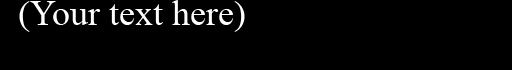
<style>
.page{position:relative;width:512px;height:70px;background:#000000}
.page>*{position:absolute;margin:0}
.t1{font:36px "TimesNewRomanPSMT";color:#ffffff}
</style>
<div class="page">
<p class="t1" style="left:19px;top:0px;width:226px;height:32px">(Your text here)</p>
</div>
